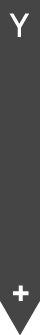
<style>
.page{position:relative;width:40px;height:335px;background:#454545}
.page>*{position:absolute;margin:0}
.t1{font:30px "CaviarDreams-Bold";letter-spacing:-0.08em;color:#ffffff}
.t2{font:36px "CaviarDreams-Bold";letter-spacing:-0.08em;color:#ffffff}
</style>
<div class="page">
<p class="t1" style="left:9px;top:13px;width:20px;height:24px">Y</p>
<p class="t2" style="left:13px;top:285px;width:16px;height:16px">+</p>
</div>
